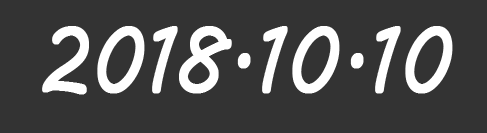
<style>
.page{position:relative;width:487px;height:133px;background:#333333}
.page>*{position:absolute;margin:0}
.t1{font:92.8px "MVBoli";color:#ffffff;font-weight:bold;scale:0.79 1}
</style>
<div class="page">
<p class="t1" style="left:42px;top:26px;width:411px;height:69px">2018.10.10</p>
</div>
